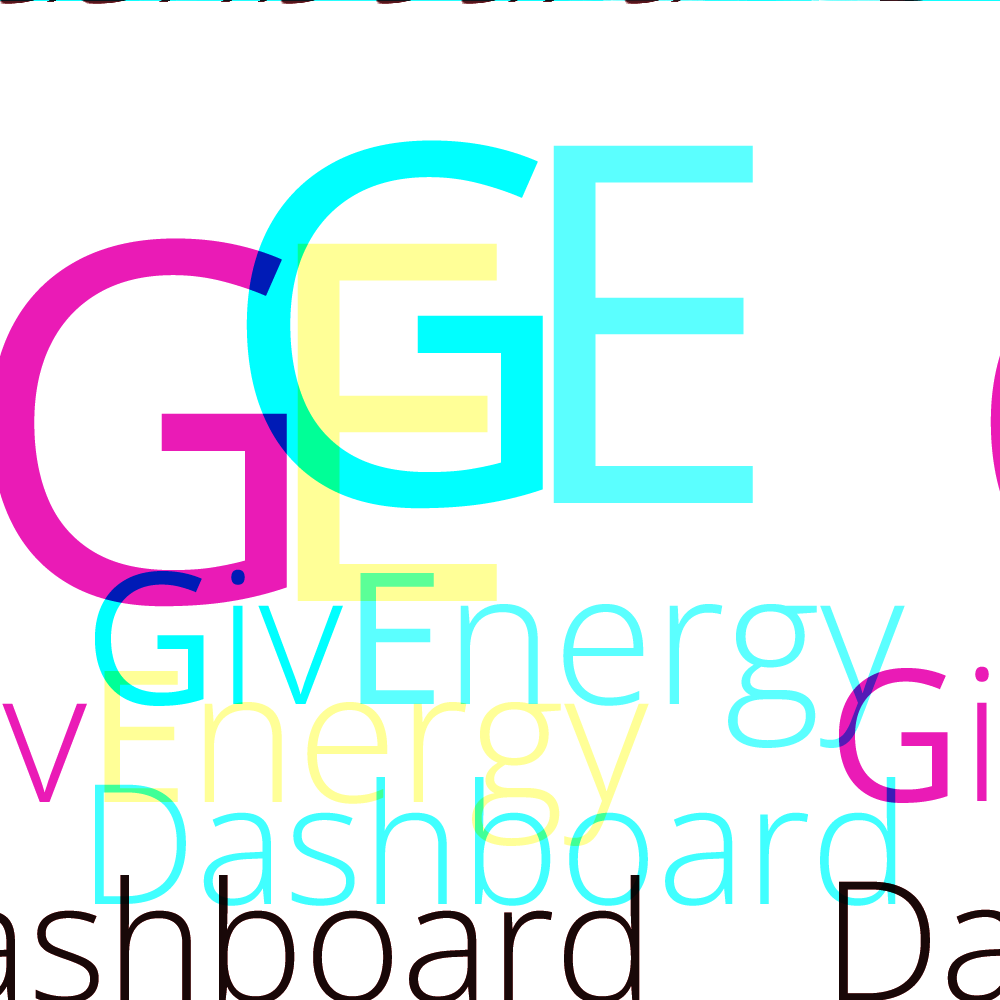
<style>
.page{position:relative;width:1000px;height:1000px;background:#ffffff}
.page>*{position:absolute;margin:0}
.t1{font:500px "OpenSans-Regular";letter-spacing:-0.15em}
.t2{font:166.7px "OpenSansRoman-Light"}
.t3{font:183.3px "OpenSans-Regular"}
.t4{font:183.3px "OpenSansRoman-Light"}
</style>
<div class="page">
<p class="t1" style="left:246px;top:139px;width:507px;height:369px">GE</p>
<p class="t2" style="left:95px;top:568px;width:810px;height:337px;text-align:center"><span class="t3">G</span><span class="t4">iv</span><span class="t3">E</span><span class="t4">nergy<br></span>Dashboard</p>
</div>
